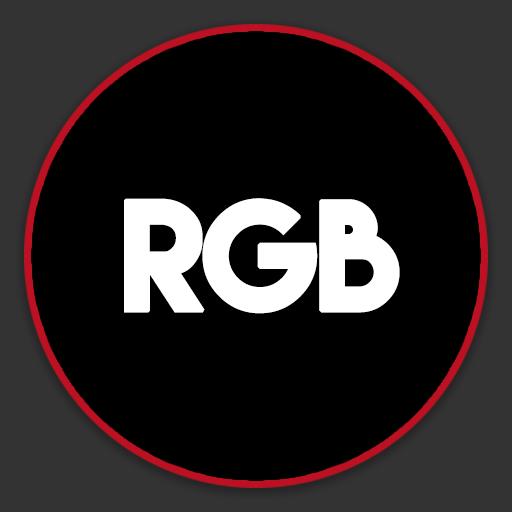
<style>
.page{position:relative;width:512px;height:512px;background:#000000}
.page>*{position:absolute;margin:0}
.t1{font:139.4px "LemonMilk";letter-spacing:-0.02em;color:#ffffff;font-weight:bold}
</style>
<div class="page">
<p class="t1" style="left:124px;top:198px;width:276px;height:116px">RGB</p>
</div>
